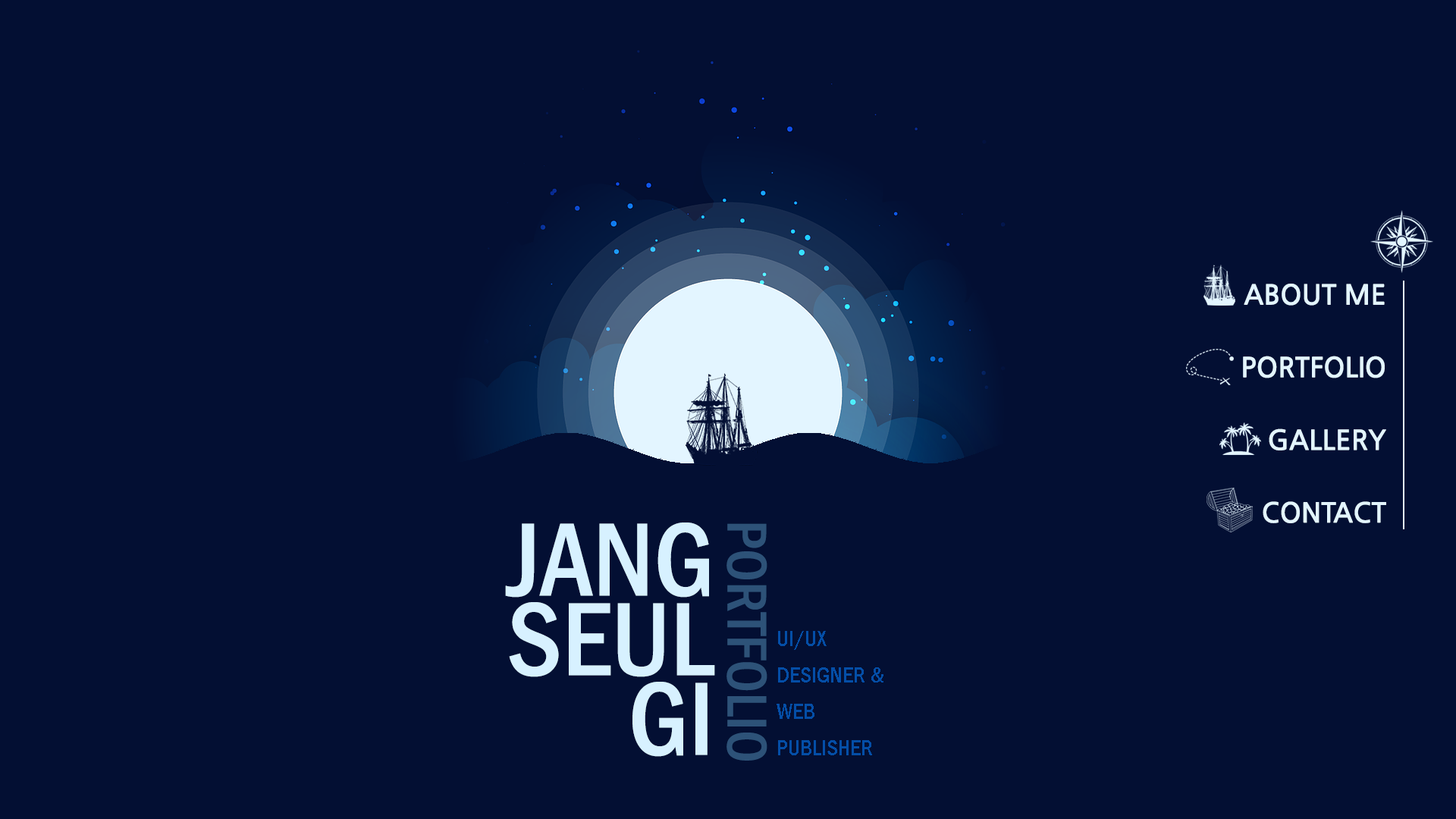
<style>
.page{position:relative;width:1456px;height:819px;background:#030f33}
.page>*{position:absolute;margin:0}
.t1{font:27.3px/36.3px "NanumGothicBold";color:#e3f5ff}
.t2{font:107.8px/79.6px "FranklinGothic-MediumCond";color:#d7f1ff}
.t3{font:57.9px "FranklinGothic-MediumCond";color:#2d5278}
.t4{font:22.7px/36.4px "FranklinGothic-MediumCond";color:#044ea7}
</style>
<div class="page">
<p class="t1" style="left:1243px;top:284px;width:143px;height:239px;text-align:right">ABOUT ME<br><br>PORTFOLIO<br><br>GALLERY<br><br>CONTACT</p>
<p class="t2" style="left:505px;top:522px;width:210px;height:235px;text-align:right">JANG<br>SEUL<br>GI</p>
<p class="t3" style="left:726px;top:523px;width:41px;height:238px;rotate:90deg">PORTFOLIO</p>
<p class="t4" style="left:777px;top:631px;width:106px;height:124px">UI/UX<br>DESIGNER &amp;<br>WEB<br>PUBLISHER</p>
</div>
